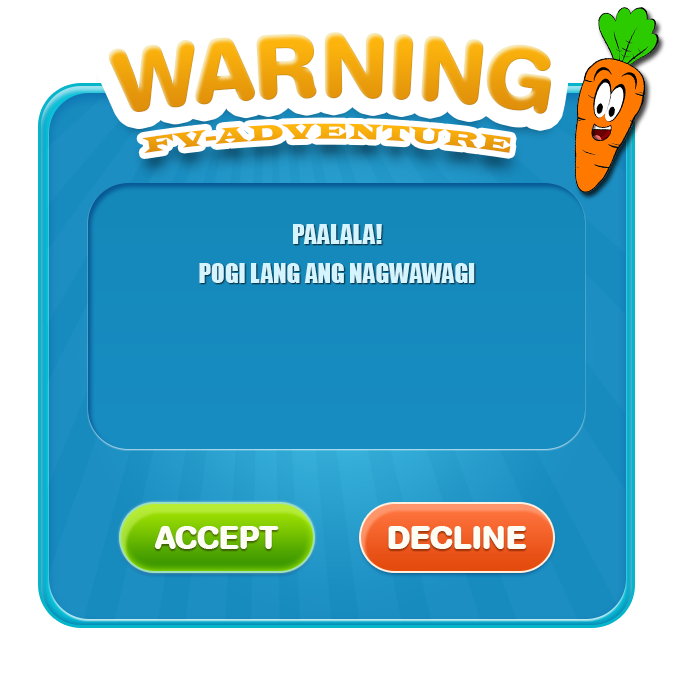
<style>
.page{position:relative;width:700px;height:700px;background:#ffffff}
.page>*{position:absolute;margin:0}
.t1{font:90px "AGBookRounded-Bold";color:#f8a900;text-transform:uppercase}
.t2{font:23.3px "LatinWide";color:#f3a90c;text-transform:uppercase}
.t3{font:25px/39px "Impact";color:#d4f5ff;text-transform:uppercase}
.t4{font:32px "AGBookRounded-Bold";color:#fdfdf3;text-transform:uppercase}
.t5{font:33px "AGBookRounded-Bold";color:#fdfdf3;text-transform:uppercase}
</style>
<div class="page">
<p class="t1" style="left:108px;top:32px;width:443px;height:82px">WARNING</p>
<p class="t2" style="left:142px;top:123px;width:369px;height:31px">fv-adventure</p>
<p class="t3" style="left:199px;top:224px;width:276px;height:59px;text-align:center">Paalala!<br>POGI LANG ANG NAGWAWAGI</p>
<p class="t4" style="left:154px;top:526px;width:125px;height:23px">ACCEPT</p>
<p class="t5" style="left:388px;top:526px;width:138px;height:23px">DECLINE</p>
</div>
